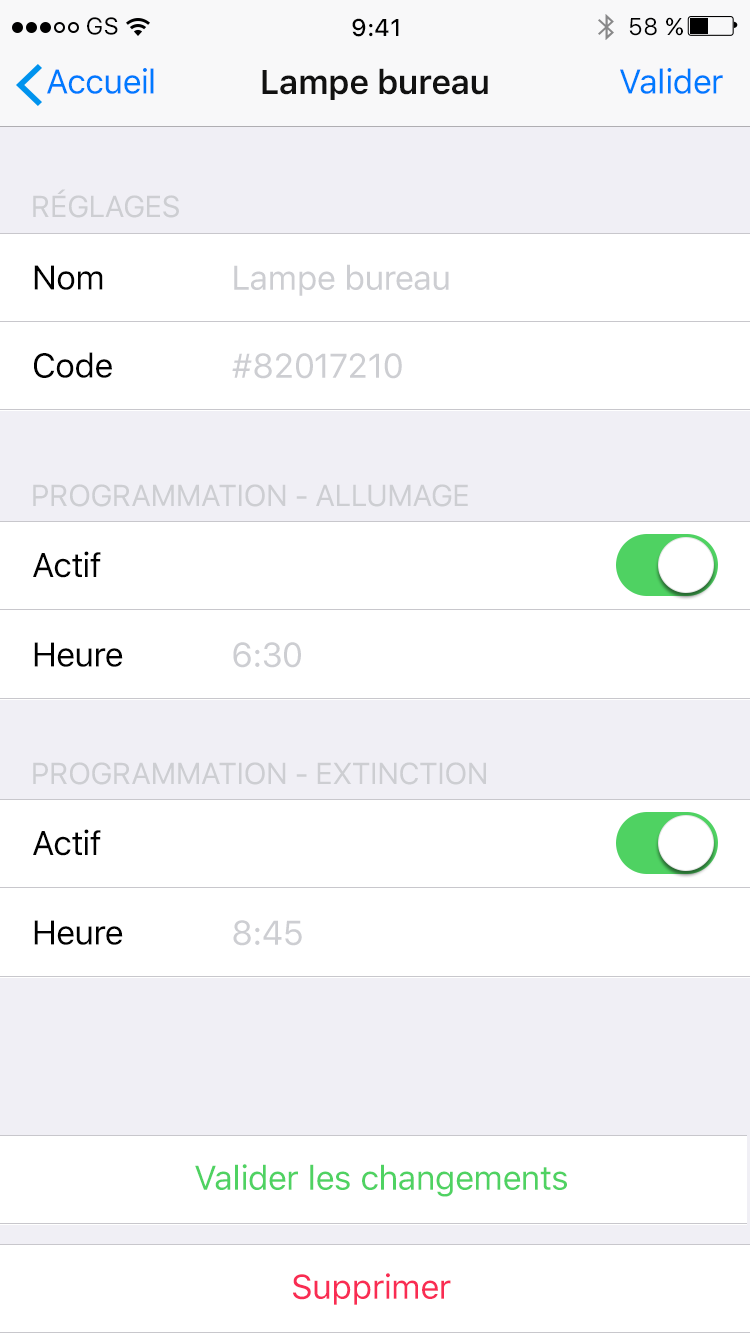
<style>
.page{position:relative;width:750px;height:1334px;background:#ffffff}
.page>*{position:absolute;margin:0}
.t1{font:24px "SFUIText-Regular";color:#000000}
.t2{font:24px "SFUIText-Medium";color:#000000}
.t3{font:34px "SFUIText-Regular";letter-spacing:-0.024em;color:#007aff}
.t4{font:34px "SFUIText-Semibold";letter-spacing:-0.024em;color:#111111}
.t5{font:30px "SFUIText-Regular";letter-spacing:-0.024em;color:#cdced2}
.t6{font:34px "SFUIText-Regular";letter-spacing:-0.024em;color:#000000}
.t7{font:34px "SFUIText-Regular";letter-spacing:-0.024em;color:#cdced2}
.t8{font:34px "SFUIText-Regular";letter-spacing:-0.024em;color:#4fd262}
.t9{font:34px "SFUIText-Regular";letter-spacing:-0.024em;color:#f92c53}
</style>
<div class="page">
<p class="t1" style="left:87px;top:17px;width:31px;height:18px">GS</p>
<p class="t1" style="left:629px;top:17px;width:54px;height:19px">58 %</p>
<p class="t2" style="left:352px;top:18px;width:47px;height:19px">9:41</p>
<p class="t3" style="left:47px;top:68px;width:107px;height:26px">Accueil</p>
<p class="t4" style="left:262px;top:68px;width:226px;height:32px">Lampe bureau</p>
<p class="t3" style="left:620px;top:68px;width:103px;height:26px">Valider</p>
<p class="t5" style="left:33px;top:189px;width:146px;height:29px">RÉGLAGES</p>
<p class="t6" style="left:34px;top:265px;width:69px;height:25px">Nom</p>
<p class="t7" style="left:234px;top:264px;width:215px;height:32px">Lampe bureau</p>
<p class="t6" style="left:34px;top:352px;width:78px;height:26px">Code</p>
<p class="t7" style="left:232px;top:353px;width:170px;height:26px">#82017210</p>
<p class="t5" style="left:33px;top:484px;width:435px;height:23px">PROGRAMMATION - ALLUMAGE</p>
<p class="t6" style="left:33px;top:551px;width:68px;height:27px">Actif</p>
<p class="t6" style="left:34px;top:642px;width:89px;height:25px">Heure</p>
<p class="t7" style="left:233px;top:642px;width:68px;height:26px">6:30</p>
<p class="t5" style="left:33px;top:762px;width:453px;height:23px">PROGRAMMATION - EXTINCTION</p>
<p class="t6" style="left:33px;top:829px;width:68px;height:27px">Actif</p>
<p class="t6" style="left:34px;top:920px;width:89px;height:25px">Heure</p>
<p class="t7" style="left:233px;top:920px;width:69px;height:26px">8:45</p>
<p class="t8" style="left:195px;top:1164px;width:372px;height:33px">Valider les changements</p>
<p class="t9" style="left:293px;top:1273px;width:158px;height:32px">Supprimer</p>
</div>
